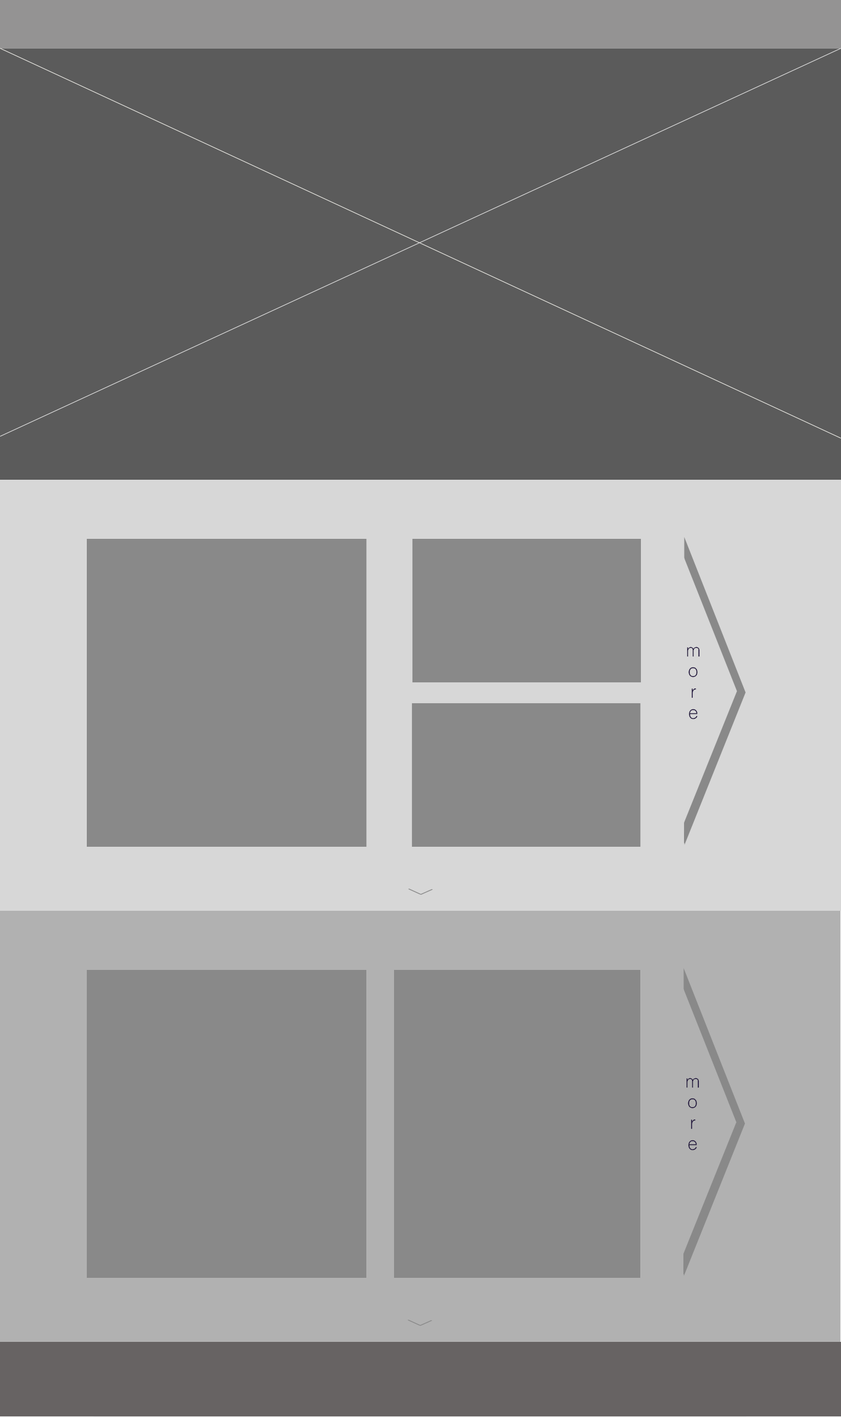
<style>
.page{position:relative;width:841px;height:1417px;background:#5b5b5b}
.page>*{position:absolute;margin:0}
.t1{font:17.2px "ShreeDev0714";color:#160836}
</style>
<div class="page">
<p class="t1" style="left:687px;top:647px;width:13px;height:72px;text-align:center">m<br>o<br>r<br>e</p>
<p class="t1" style="left:687px;top:1078px;width:13px;height:73px;text-align:center">m<br>o<br>r<br>e</p>
</div>
